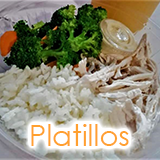
<style>
.page{position:relative;width:160px;height:160px}
.page>*{position:absolute;margin:0}
.t1{font:29.2px "CenturyGothic";color:#ffa030}
</style>
<div class="page">
<p class="t1" style="left:31px;top:124px;width:98px;height:22px">Platillos</p>
</div>
